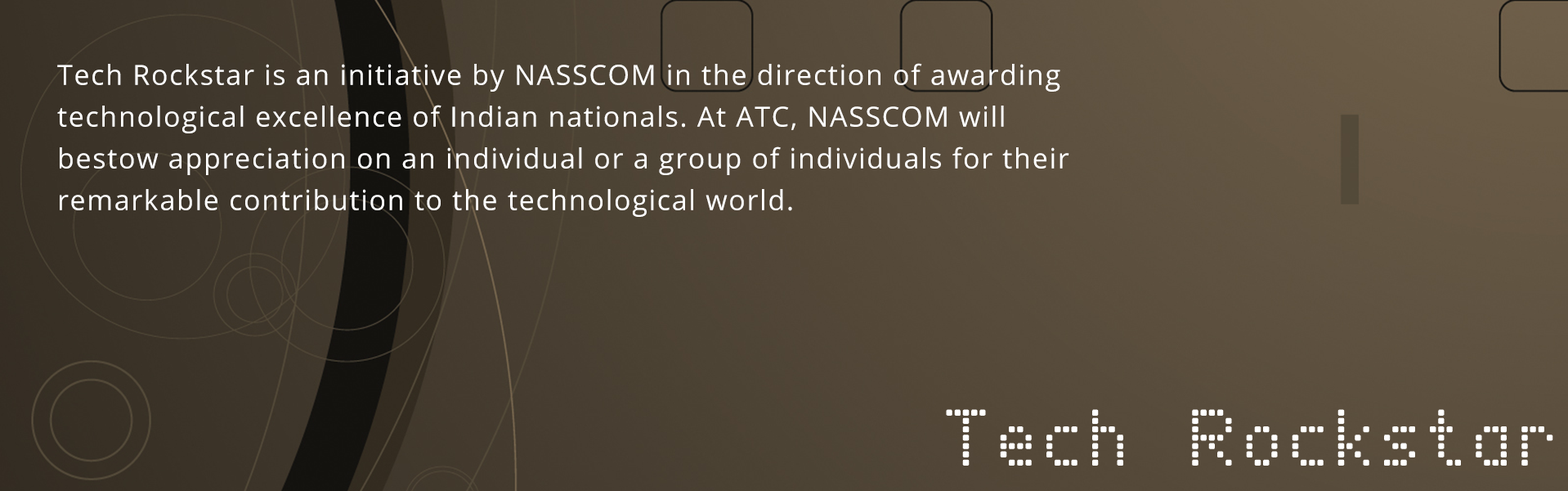
<style>
.page{position:relative;width:1568px;height:491px}
.page>*{position:absolute;margin:0}
.t1{font:27.8px/41.7px "OpenSans";letter-spacing:0.05em;color:#ffffff}
.t2{font:83.4px "EnhancedDotDigital-7";letter-spacing:0.05em;color:#ffffff}
</style>
<div class="page">
<p class="t1" style="left:57px;top:63px;width:1012px;height:154px">Tech Rockstar is an initiative by NASSCOM in the direction of awarding technological excellence of Indian nationals. At ATC, NASSCOM will bestow appreciation on an individual or a group of individuals for their remarkable contribution to the technological world.</p>
<p class="t2" style="left:947px;top:410px;width:605px;height:54px">Tech Rockstar</p>
</div>
